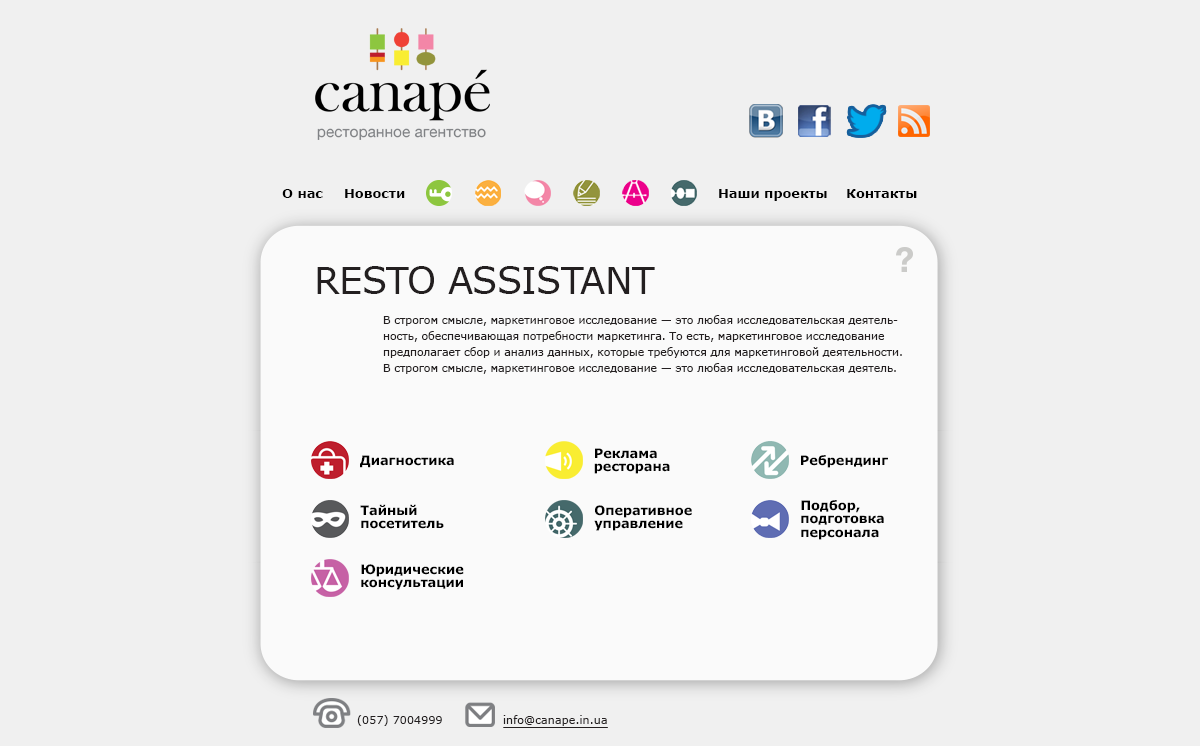
<style>
.page{position:relative;width:1200px;height:746px;background:#f0f0f0}
.page>*{position:absolute;margin:0}
.t1{font:12.9px "Verdana-Bold";color:#000000}
.t2{font:36.9px "Verdana";letter-spacing:-0.02em;color:#231f20}
.t3{font:11.2px/16.3px "Verdana";letter-spacing:-0.02em;color:#231f20}
.t4{font:12.9px/13.1px "Verdana-Bold";color:#000000}
.t5{font:11.2px "Verdana";color:#231f20}
</style>
<div class="page">
<p class="t1" style="left:282px;top:189px;width:41px;height:9px">О нас</p>
<p class="t1" style="left:345px;top:189px;width:60px;height:9px">Новости</p>
<p class="t1" style="left:719px;top:189px;width:108px;height:12px">Наши проекты</p>
<p class="t1" style="left:847px;top:189px;width:70px;height:9px">Контакты</p>
<p class="t2" style="left:317px;top:266px;width:338px;height:28px">RESTO ASSISTANT</p>
<p class="t3" style="left:383px;top:315px;width:519px;height:59px">В строгом смысле, маркетинговое исследование — это любая исследовательская деятель-<br>ность, обеспечивающая потребности маркетинга. То есть, маркетинговое исследование<br>предполагает сбор и анализ данных, которые требуются для маркетинговой деятельности.<br>В строгом смысле, маркетинговое исследование — это любая исследовательская деятель.</p>
<p class="t4" style="left:594px;top:448px;width:76px;height:26px">Реклама<br>ресторана</p>
<p class="t1" style="left:360px;top:455px;width:94px;height:13px">Диагностика</p>
<p class="t1" style="left:801px;top:455px;width:87px;height:13px">Ребрендинг</p>
<p class="t4" style="left:360px;top:504px;width:84px;height:25px">Тайный<br>посетитель</p>
<p class="t4" style="left:594px;top:505px;width:98px;height:26px">Оперативное<br>управление</p>
<p class="t4" style="left:801px;top:500px;width:83px;height:40px">Подбор,<br>подготовка<br>персонала</p>
<p class="t4" style="left:361px;top:564px;width:103px;height:26px">Юридические<br>консультации</p>
<p class="t5" style="left:357px;top:715px;width:85px;height:11px">(057) 7004999</p>
<p class="t5" style="left:503px;top:715px;width:104px;height:11px">info@canape.in.ua</p>
</div>
